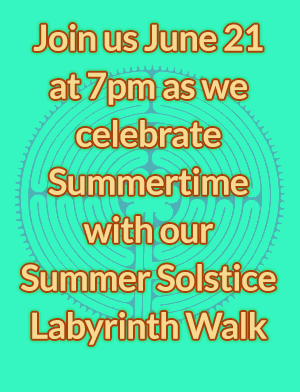
<style>
.page{position:relative;width:300px;height:392px;background:#35f5c1}
.page>*{position:absolute;margin:0}
.t1{font:36px/48px "Lato-Bold";letter-spacing:-0.02em;color:#f6da8f}
</style>
<div class="page">
<p class="t1" style="left:21px;top:24px;width:255px;height:321px;text-align:center">Join us June 21 at 7pm as we celebrate Summertime with our <br>Summer Solstice Labyrinth Walk</p>
</div>
